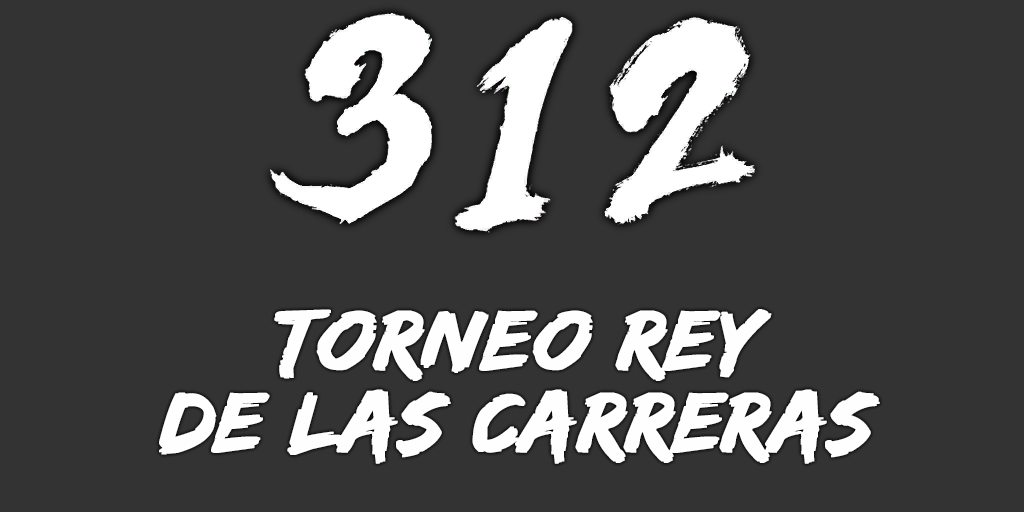
<style>
.page{position:relative;width:1024px;height:512px;background:#333333}
.page>*{position:absolute;margin:0}
.t1{font:88px/82px "EdoSZ";color:#fefefe;font-weight:bold;font-style:italic;scale:1.04 1}
</style>
<div class="page">
<p class="t1" style="left:159px;top:309px;width:721px;height:155px;text-align:center">torneo rey<br>de las carreras</p>
</div>
